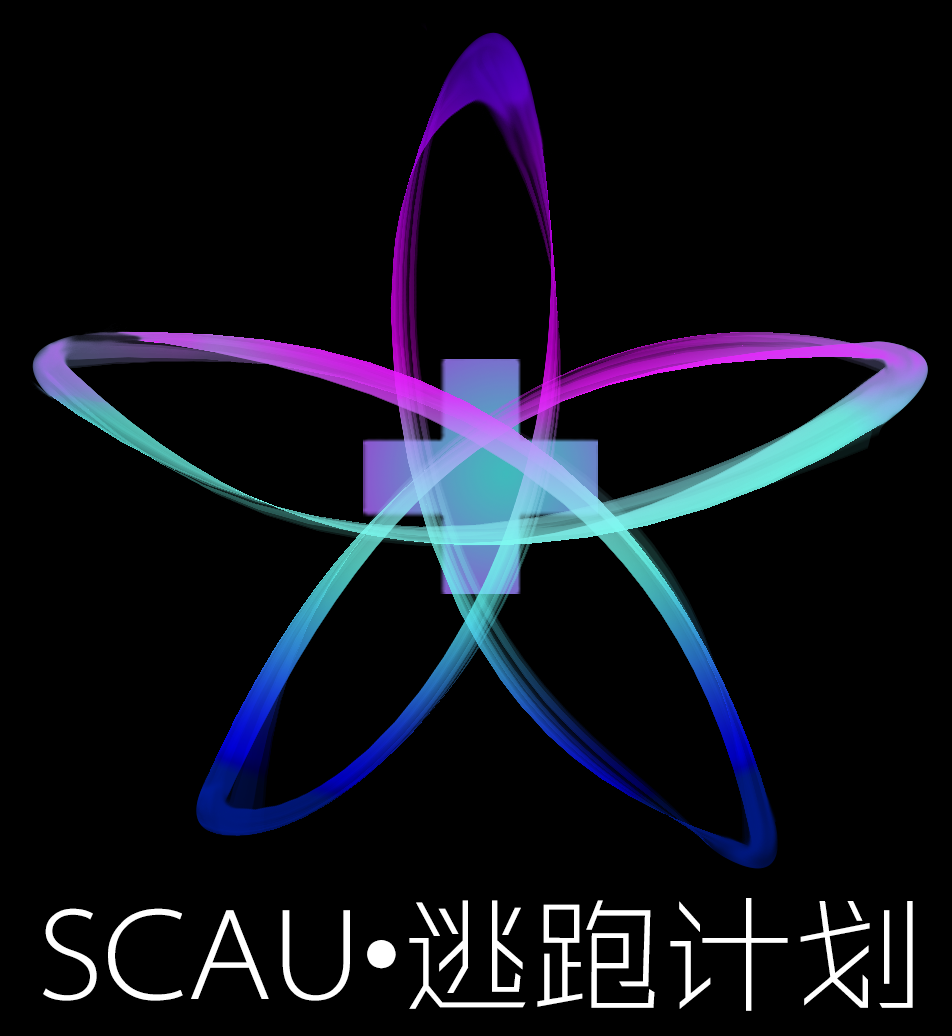
<style>
.page{position:relative;width:952px;height:1036px;background:#000000}
.page>*{position:absolute;margin:0}
.t1{font:131px "ZHSRXT--GBK1-0";color:#ffffff}
.t2{font:39.3px "ZHSRXT--GBK1-0";color:#ffffff}
</style>
<div class="page">
<p class="t1" style="left:43px;top:898px;width:870px;height:113px">SCAU<span class="t2">●</span>逃跑计划</p>
</div>
